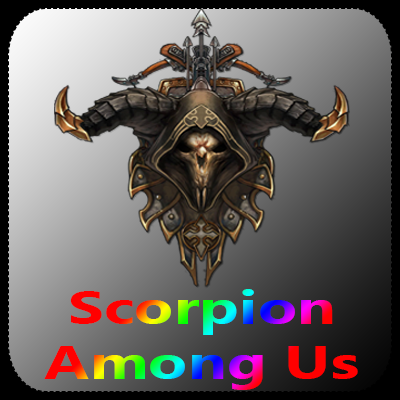
<style>
.page{position:relative;width:400px;height:400px}
.page>*{position:absolute;margin:0}
.t1{font:46px "SegoeUI-Bold";scale:1.4 1}
</style>
<div class="page">
<p class="t1" style="left:44px;top:289px;width:314px;height:101px;text-align:center">Scorpion<br>Among Us</p>
</div>
